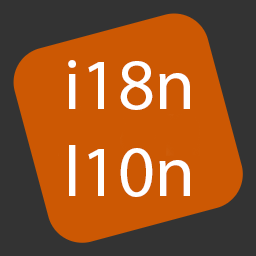
<style>
.page{position:relative;width:256px;height:256px;background:#cc5803}
.page>*{position:absolute;margin:0}
.t1{font:72px "MyriadPro-Regular";color:#ffffff}
</style>
<div class="page">
<p class="t1" style="left:68px;top:60px;width:122px;height:137px">i18n<br>l10n</p>
</div>
